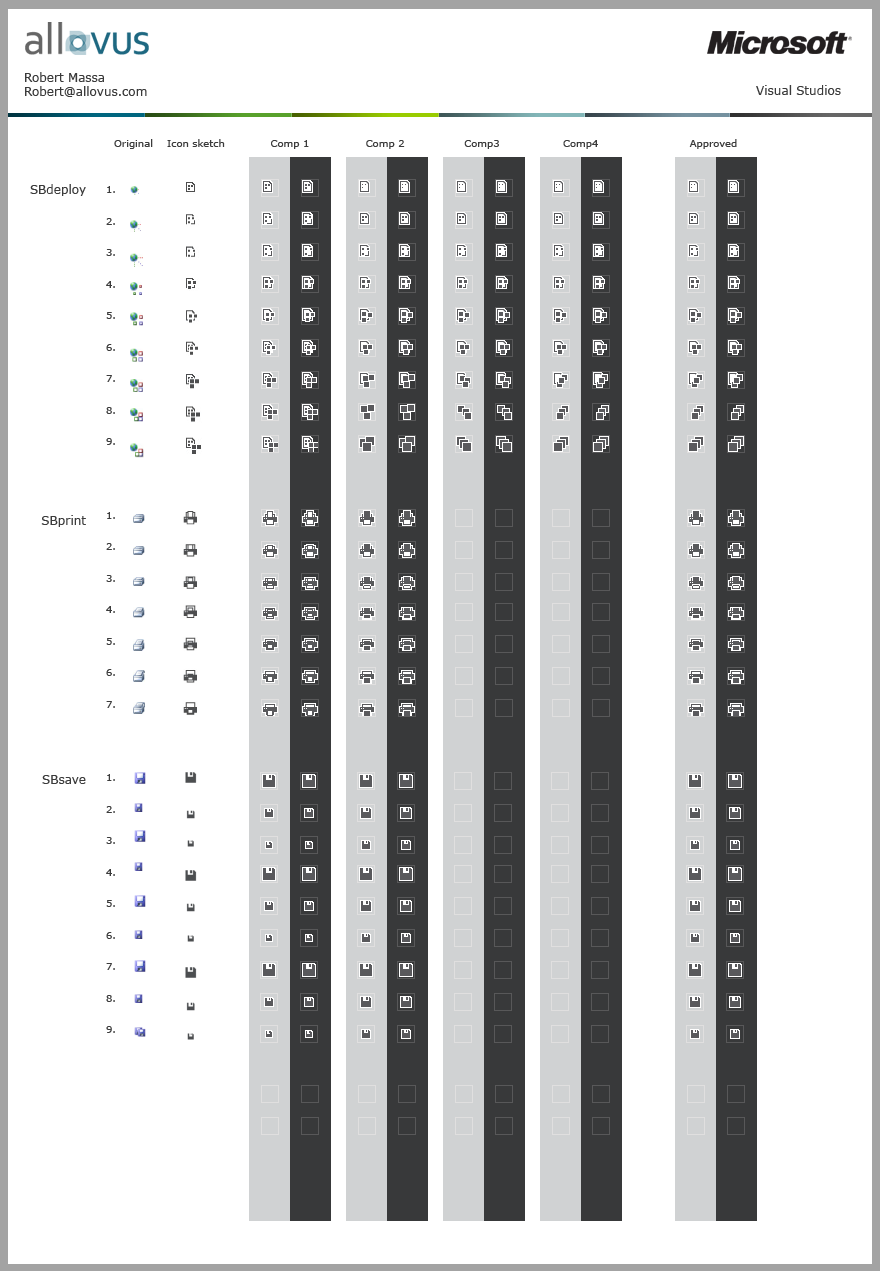
<style>
.page{position:relative;width:880px;height:1271px;background:#ffffff}
.page>*{position:absolute;margin:0}
.t1{font:12px "Verdana";color:#3b3b3b}
.t2{font:10px "Verdana";color:#3b3b3b}
.t3{font:10px/10.5px "Verdana";color:#3b3b3b}
</style>
<div class="page">
<p class="t1" style="left:25px;top:72px;width:122px;height:25px">Robert Massa<br>Robert@allovus.com</p>
<p class="t1" style="left:756px;top:85px;width:85px;height:10px">Visual Studios</p>
<p class="t2" style="left:114px;top:139px;width:623px;height:10px">Original    Icon sketch             Comp 1                Comp 2                 Comp3                  Comp4                          Approved</p>
<p class="t1" style="left:30px;top:184px;width:56px;height:600px;text-align:right">SBdeploy<br><br><br><br><br><br><br><br><br><br><br><br><br><br><br><br><br><br><br><br><br><br><br>SBprint<br><br><br><br><br><br><br><br><br><br><br><br><br><br><br><br><br><br>SBsave</p>
<p class="t3" style="left:106px;top:186px;width:9px;height:847px">1.<br><br><br>2.<br><br><br>3.<br><br><br>4.<br><br><br>5.<br><br><br>6.<br><br><br>7.<br><br><br>8.<br><br><br>9.<br><br><br><br><br><br><br>1.<br><br><br>2.<br><br><br>3.<br><br><br>4.<br><br><br>5.<br><br><br>6.<br><br><br>7.<br><br><br><br><br><br><br>1.<br><br><br>2.<br><br><br>3.<br><br><br>4.<br><br><br>5.<br><br><br>6.<br><br><br>7.<br><br><br>8.<br><br><br>9.</p>
</div>
